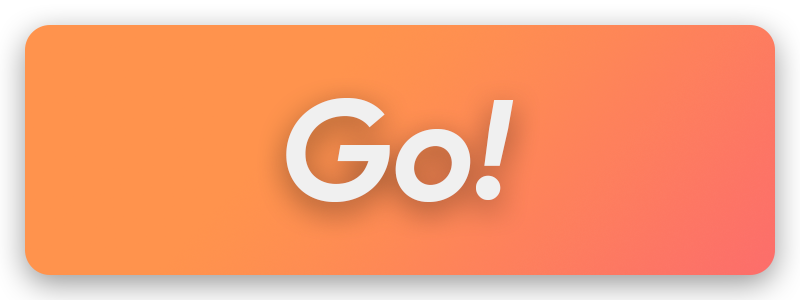
<style>
.page{position:relative;width:800px;height:300px;background:#ff934d}
.page>*{position:absolute;margin:0}
.t1{font:140px "ProductSans-BoldItalic";color:#f0f0f0}
</style>
<div class="page">
<p class="t1" style="left:286px;top:98px;width:228px;height:104px">Go!</p>
</div>
